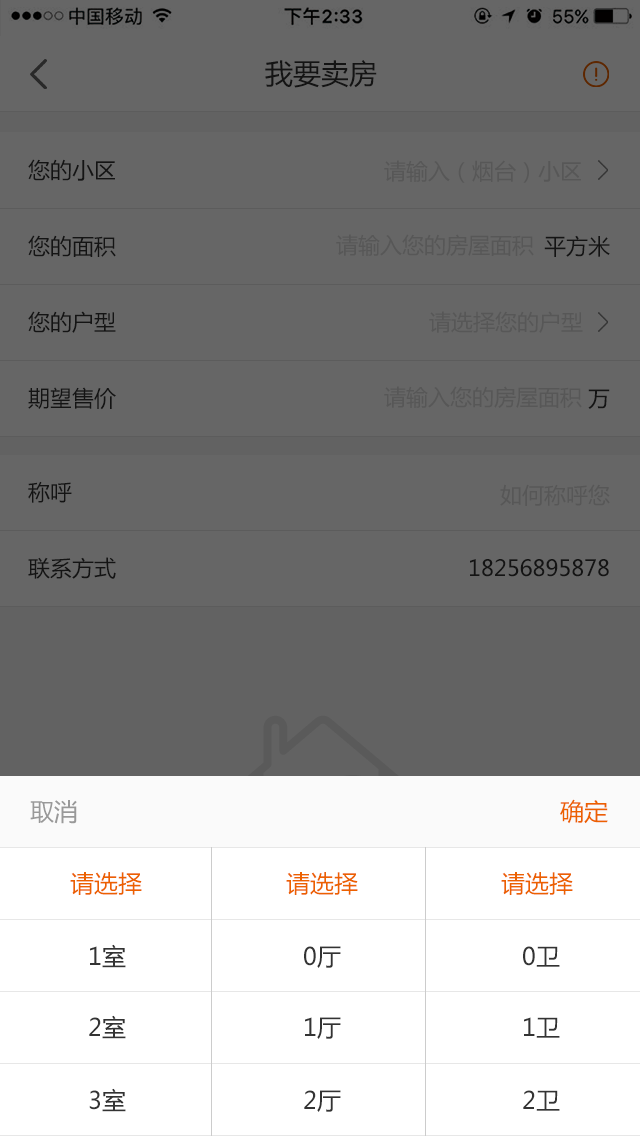
<style>
.page{position:relative;width:640px;height:1136px;background:#666666}
.page>*{position:absolute;margin:0}
.t1{font:28px "MicrosoftYaHei";color:#141414}
.t2{font:22px "MicrosoftYaHei";color:#141414}
.t3{font:22px "MicrosoftYaHei";color:#575757}
.t4{font:24px "MicrosoftYaHei";color:#999999}
.t5{font:24px "MicrosoftYaHei";color:#ec6100}
.t6{font:24px "MicrosoftYaHei";color:#333333}
</style>
<div class="page">
<p class="t1" style="left:265px;top:60px;width:112px;height:28px">我要卖房</p>
<p class="t2" style="left:28px;top:159px;width:87px;height:22px">您的小区</p>
<p class="t3" style="left:384px;top:160px;width:197px;height:23px">请输入（烟台）小区</p>
<p class="t2" style="left:28px;top:235px;width:88px;height:22px">您的面积</p>
<p class="t3" style="left:336px;top:234px;width:198px;height:22px">请输入您的房屋面积</p>
<p class="t2" style="left:544px;top:235px;width:66px;height:22px">平方米</p>
<p class="t2" style="left:28px;top:311px;width:88px;height:22px">您的户型</p>
<p class="t3" style="left:429px;top:311px;width:154px;height:22px">请选择您的户型</p>
<p class="t2" style="left:28px;top:387px;width:88px;height:23px">期望售价</p>
<p class="t3" style="left:384px;top:386px;width:198px;height:22px">请输入您的房屋面积</p>
<p class="t2" style="left:588px;top:389px;width:22px;height:20px">万</p>
<p class="t2" style="left:28px;top:481px;width:44px;height:22px">称呼</p>
<p class="t3" style="left:500px;top:484px;width:110px;height:22px">如何称呼您</p>
<p class="t2" style="left:28px;top:557px;width:88px;height:22px">联系方式</p>
<p class="t2" style="left:470px;top:559px;width:139px;height:18px">18256895878</p>
<p class="t4" style="left:30px;top:800px;width:47px;height:24px">取消</p>
<p class="t5" style="left:560px;top:799px;width:48px;height:25px">确定</p>
<p class="t5" style="left:70px;top:872px;width:72px;height:23px">请选择</p>
<p class="t5" style="left:286px;top:872px;width:72px;height:23px">请选择</p>
<p class="t5" style="left:501px;top:872px;width:72px;height:23px">请选择</p>
<p class="t6" style="left:90px;top:944px;width:36px;height:24px">1室</p>
<p class="t6" style="left:304px;top:946px;width:37px;height:22px">0厅</p>
<p class="t6" style="left:523px;top:946px;width:37px;height:21px">0卫</p>
<p class="t6" style="left:89px;top:1015px;width:37px;height:24px">2室</p>
<p class="t6" style="left:305px;top:1017px;width:36px;height:22px">1厅</p>
<p class="t6" style="left:524px;top:1017px;width:36px;height:21px">1卫</p>
<p class="t6" style="left:89px;top:1088px;width:37px;height:24px">3室</p>
<p class="t6" style="left:304px;top:1090px;width:37px;height:22px">2厅</p>
<p class="t6" style="left:523px;top:1090px;width:37px;height:21px">2卫</p>
</div>
